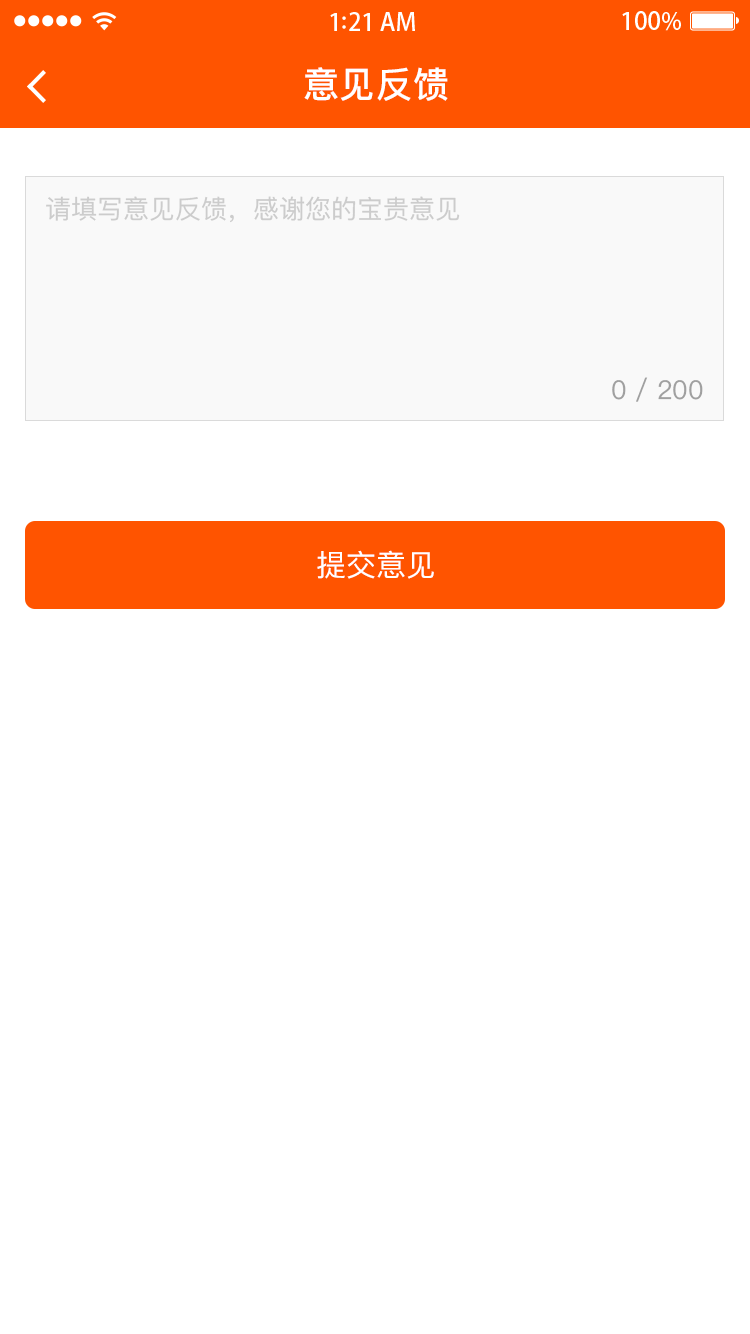
<style>
.page{position:relative;width:750px;height:1334px;background:#ffffff}
.page>*{position:absolute;margin:0}
.t1{font:36px "PingFangSC-Medium";letter-spacing:0.02em;color:#ffffff}
.t2{font:26px "PingFangSC-Regular";color:#cccccc}
.t3{font:26px "PingFangSC-Regular";color:#a0a0a0}
.t4{font:30px "PingFangSC-Regular";color:#ffffff;text-transform:uppercase}
</style>
<div class="page">
<p class="t1" style="left:304px;top:67px;width:144px;height:34px">意见反馈</p>
<p class="t2" style="left:46px;top:196px;width:414px;height:27px">请填写意见反馈，感谢您的宝贵意见</p>
<p class="t3" style="left:612px;top:377px;width:91px;height:25px">0 / 200</p>
<p class="t4" style="left:317px;top:550px;width:117px;height:29px">提交意见</p>
</div>
